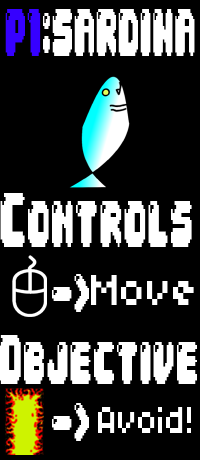
<style>
.page{position:relative;width:200px;height:460px;background:#000000}
.page>*{position:absolute;margin:0}
.t1{font:56.7px "04b30";color:#ffffff;scale:0.41 1}
.t2{font:56.7px "04b30";color:#3600ff;scale:0.41 1}
.t3{font:65.1px "04b30";color:#ffffff;scale:0.45 1}
.t4{font:46.4px "04b30";color:#ffffff;scale:0.59 1}
.t5{font:47.3px "04b03";color:#ffffff;scale:0.87 1}
.t6{font:41.9px "04b03";color:#ffffff;scale:0.77 1}
</style>
<div class="page">
<p class="t1" style="left:5px;top:9px;width:190px;height:47px"><span class="t2">P1</span>:SARDINA</p>
<p class="t3" style="left:0px;top:193px;width:192px;height:54px">Controls</p>
<p class="t4" style="left:52px;top:274px;width:37px;height:38px">-&gt;</p>
<p class="t5" style="left:91px;top:275px;width:103px;height:30px">Move</p>
<p class="t4" style="left:52px;top:403px;width:37px;height:38px">-&gt;</p>
<p class="t6" style="left:98px;top:407px;width:93px;height:26px">Avoid!</p>
</div>
